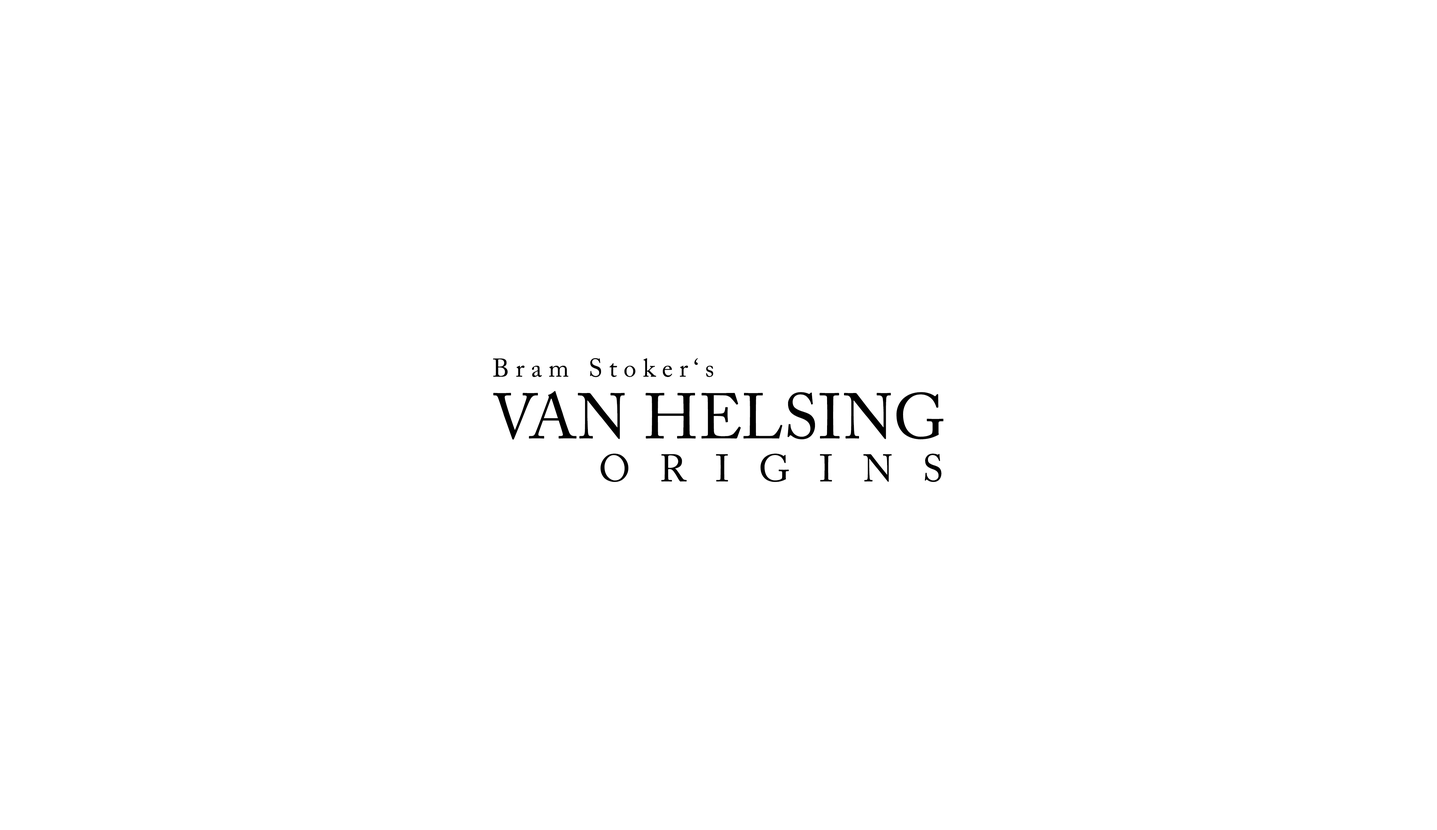
<style>
.page{position:relative;width:1437px;height:830px;background:#ffffff}
.page>*{position:absolute;margin:0}
.t1{font:25.5px "ACaslonPro-Regular";color:#000000}
.t2{font:63.8px "ACaslonPro-Regular";color:#000000}
.t3{font:38.3px "ACaslonPro-Regular";color:#000000}
</style>
<div class="page">
<p class="t1" style="left:493px;top:358px;width:220px;height:19px">B r a m   S t o k e r ‘ s</p>
<p class="t2" style="left:493px;top:391px;width:450px;height:49px">VAN HELSING</p>
<p class="t3" style="left:600px;top:454px;width:341px;height:28px">O   R   I   G   I   N   S</p>
</div>
